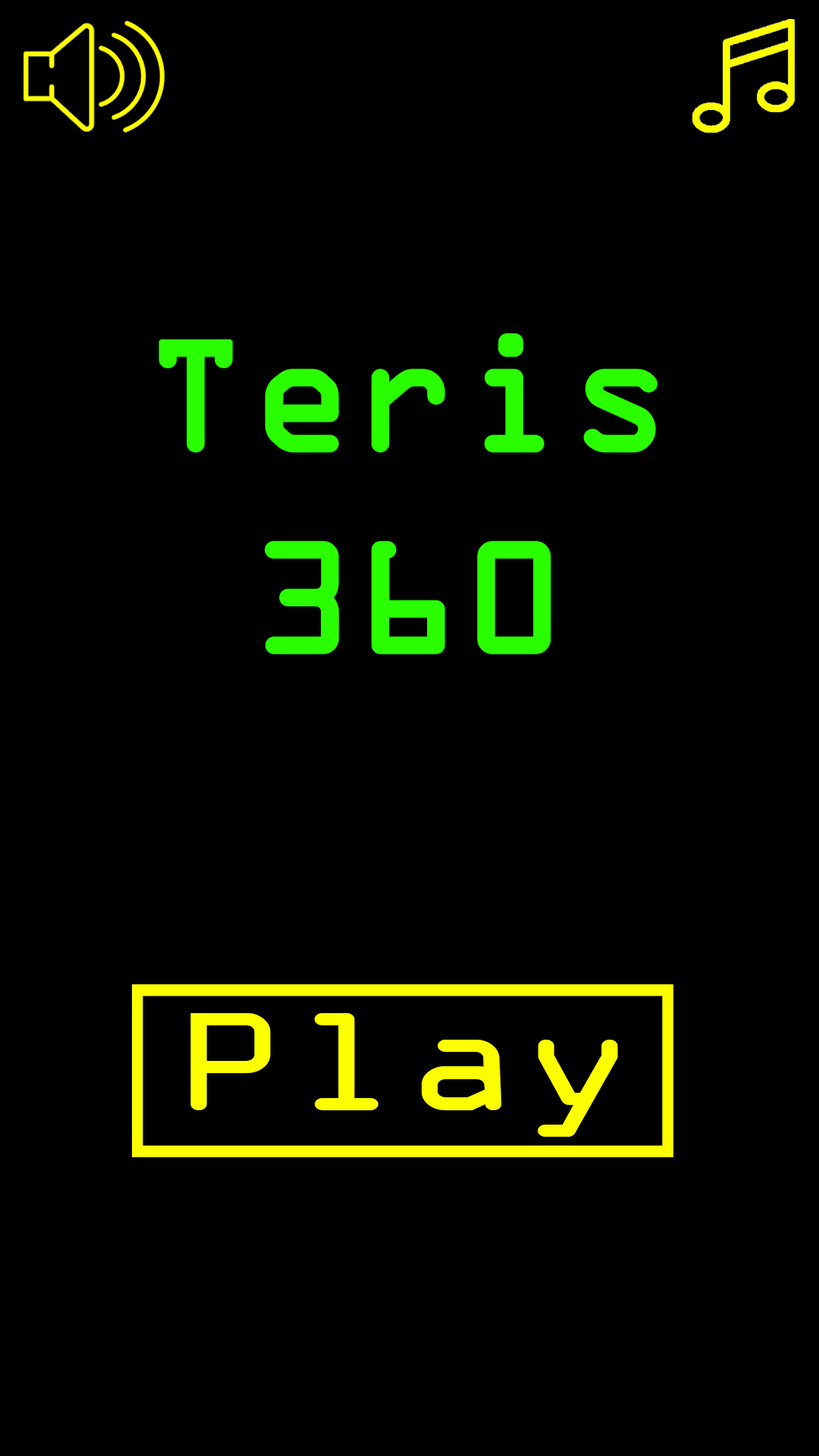
<style>
.page{position:relative;width:819px;height:1456px;background:#000000}
.page>*{position:absolute;margin:0}
.t1{font:168.2px "OCRAExtended";color:#2aff00;font-weight:bold}
.t2{font:150.3px "OCRAExtended";color:#fcff00;scale:1.27 1}
</style>
<div class="page">
<p class="t1" style="left:158px;top:333px;width:499px;height:321px;text-align:center">Teris 360</p>
<p class="t2" style="left:190px;top:1013px;width:428px;height:124px">Play</p>
</div>
